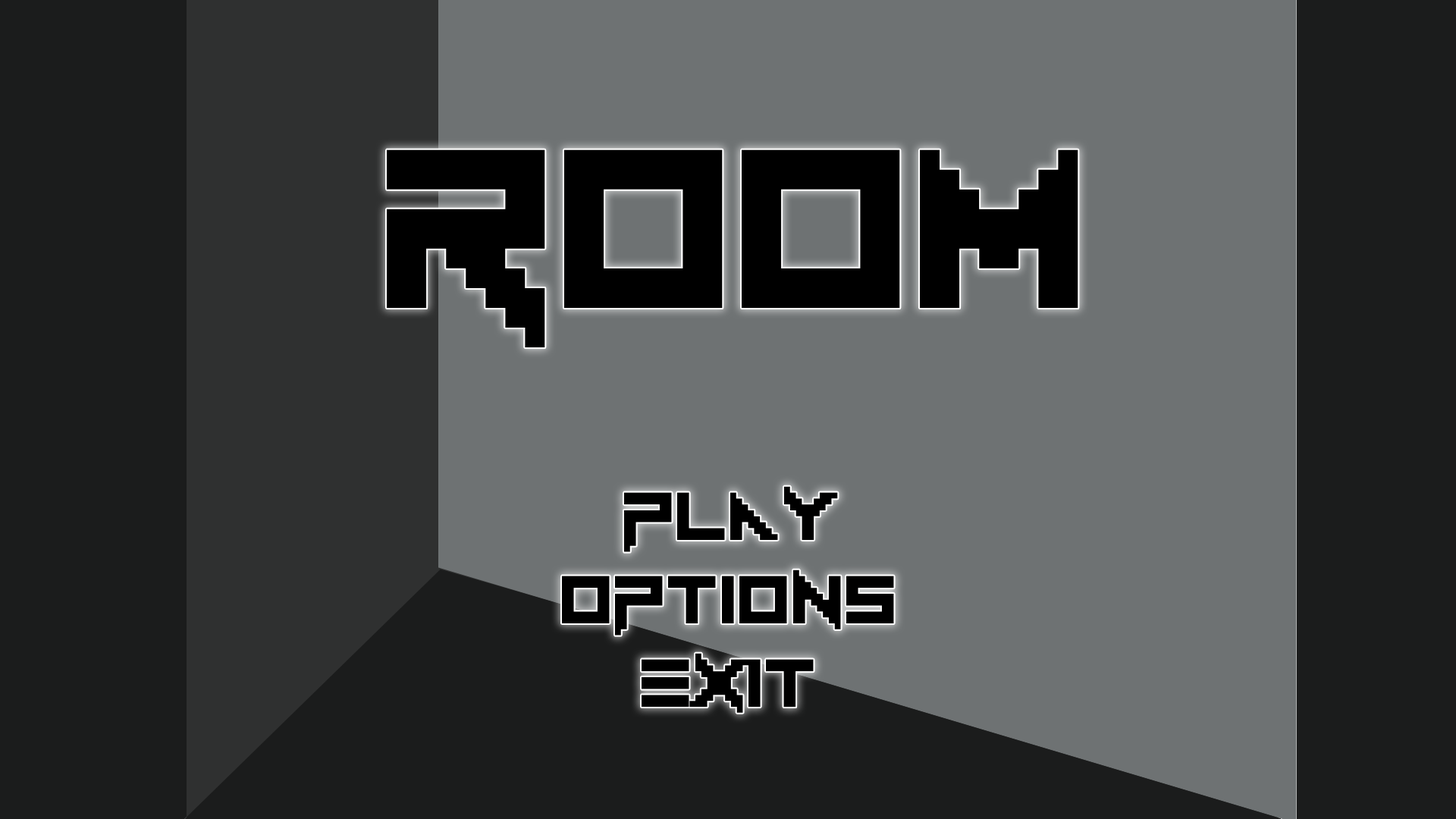
<style>
.page{position:relative;width:1456px;height:819px;background:#6e7273}
.page>*{position:absolute;margin:0}
.t1{font:316px "Vermin-Vibes-1989";color:#000000}
.t2{font:94.8px "Vermin-Vibes-1989";color:#000000}
</style>
<div class="page">
<p class="t1" style="left:387px;top:149px;width:691px;height:199px">Room</p>
<p class="t2" style="left:624px;top:486px;width:214px;height:66px">Play</p>
<p class="t2" style="left:562px;top:570px;width:332px;height:65px">Options</p>
<p class="t2" style="left:642px;top:653px;width:172px;height:60px">exit</p>
</div>
